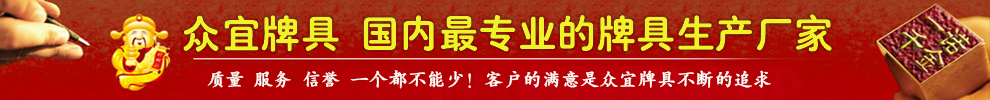
<style>
.page{position:relative;width:990px;height:100px}
.page>*{position:absolute;margin:0}
.t1{font:39.1px "HYe4gj";color:#eff129}
.t2{font:19.2px "HYc3gj";color:#fdfdf6}
</style>
<div class="page">
<p class="t1" style="left:183px;top:14px;width:649px;height:38px">众宜牌具 国内最专业的牌具生产厂家</p>
<p class="t2" style="left:207px;top:70px;width:564px;height:19px">质量 服务 信誉 一个都不能少！客户的满意是众宜牌具不断的追求</p>
</div>
